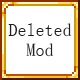
<style>
.page{position:relative;width:80px;height:80px;background:#ffffff}
.page>*{position:absolute;margin:0}
.t1{font:18px "SimSun";color:#1e1e1e}
</style>
<div class="page">
<p class="t1" style="left:8px;top:23px;width:64px;height:14px">Deleted</p>
<p class="t1" style="left:26px;top:43px;width:28px;height:14px">Mod</p>
</div>
